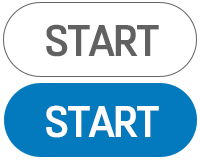
<style>
.page{position:relative;width:200px;height:160px;background:#ffffff}
.page>*{position:absolute;margin:0}
.t1{font:35px "TTOmniGothicH";letter-spacing:-0.05em;color:#616161;text-transform:uppercase}
.t2{font:35px "TTOmniGothicH";letter-spacing:-0.05em;color:#ffffff;text-transform:uppercase}
</style>
<div class="page">
<p class="t1" style="left:46px;top:24px;width:113px;height:33px">start</p>
<p class="t2" style="left:46px;top:105px;width:113px;height:33px">start</p>
</div>
